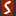
<style>
.page{position:relative;width:16px;height:16px;background:#9c2100}
.page>*{position:absolute;margin:0}
.t1{font:18px "Mistral";color:#ffffff}
</style>
<div class="page">
<p class="t1" style="left:4px;top:1px;width:7px;height:13px">S</p>
</div>
